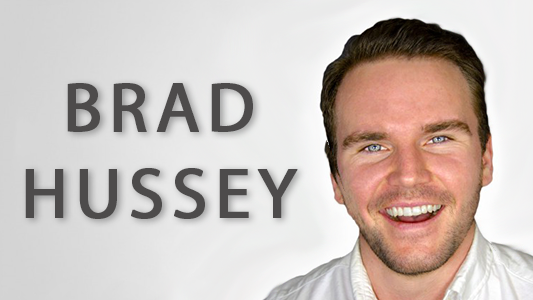
<style>
.page{position:relative;width:533px;height:300px}
.page>*{position:absolute;margin:0}
.t1{font:71.5px "MyriadPro-Regular";letter-spacing:0.08em;color:#4d4b4b;font-weight:bold}
</style>
<div class="page">
<p class="t1" style="left:25px;top:83px;width:273px;height:136px;text-align:center">BRAD<br>HUSSEY</p>
</div>
